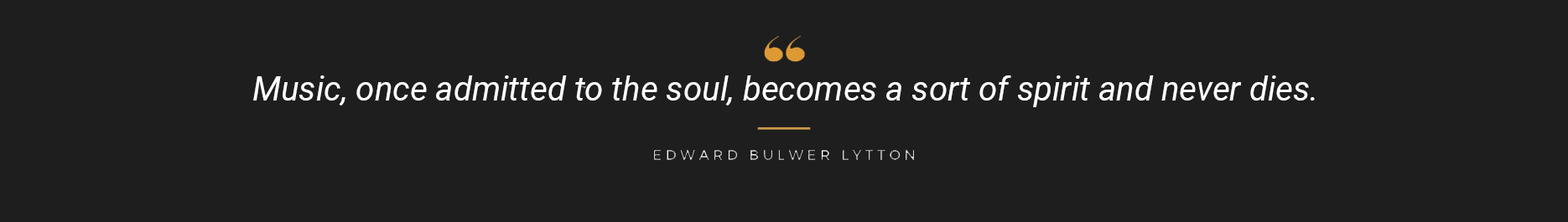
<style>
.page{position:relative;width:1568px;height:222px;background:#1e1e1e}
.page>*{position:absolute;margin:0}
.t1{font:33.5px "Roboto-Italic";color:#ffffff}
</style>
<div class="page">
<p class="t1" style="left:253px;top:75px;width:1062px;height:32px">Music, once admitted to the soul, becomes a sort of spirit and never dies.</p>
</div>
